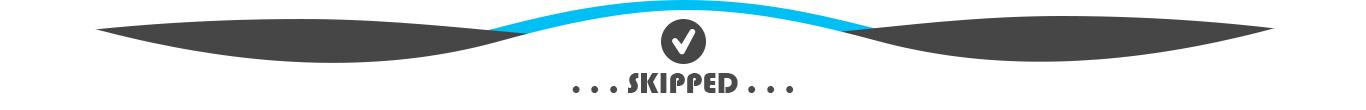
<style>
.page{position:relative;width:1366px;height:110px;background:#ffffff}
.page>*{position:absolute;margin:0}
.t1{font:30px "Bauhaus93";color:#4b4b4b}
</style>
<div class="page">
<p class="t1" style="left:572px;top:73px;width:222px;height:20px">. . . SKIPPED . . .</p>
</div>
